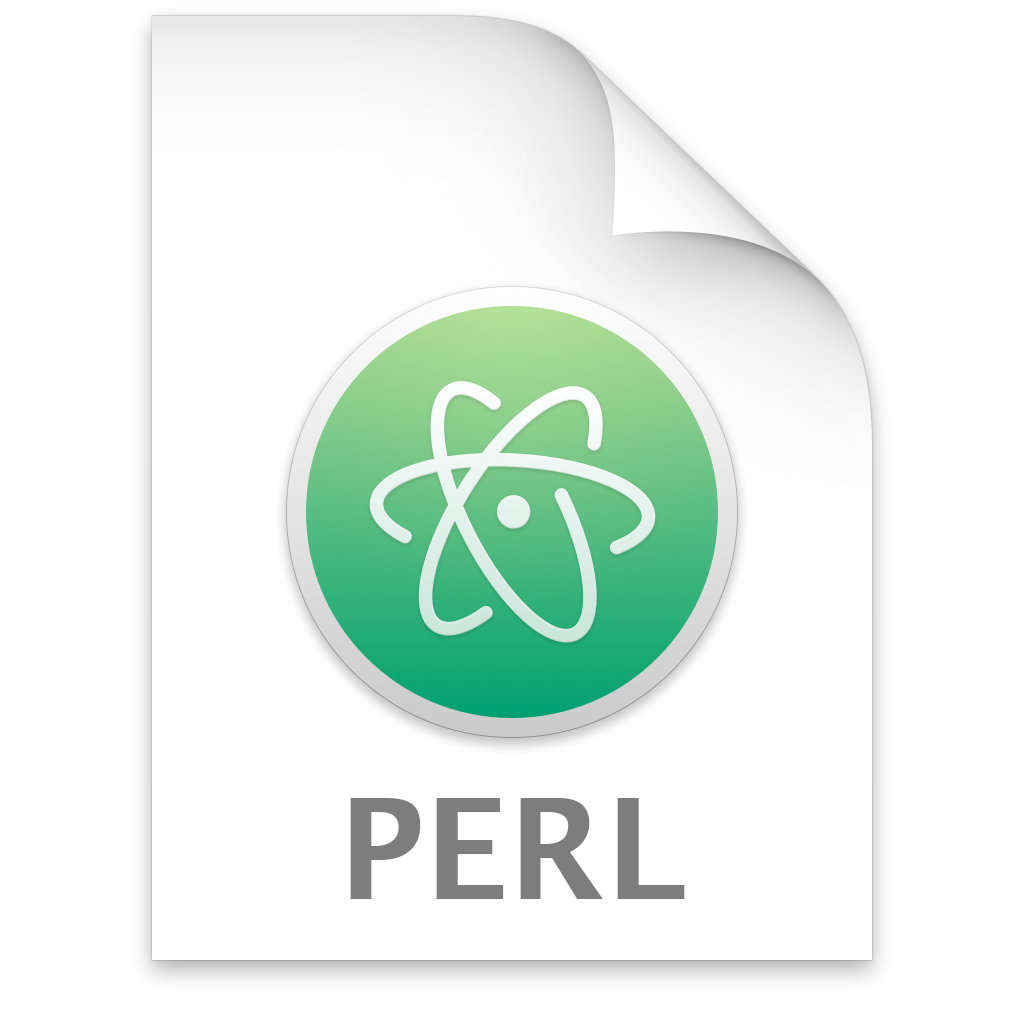
<style>
.page{position:relative;width:1024px;height:1024px;background:#ffffff}
.page>*{position:absolute;margin:0}
.t1{font:140px "LucidaGrande-Bold";color:#7d7d7d}
</style>
<div class="page">
<p class="t1" style="left:350px;top:798px;width:335px;height:101px">PERL</p>
</div>
